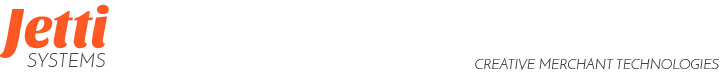
<style>
.page{position:relative;width:720px;height:72px;background:#ffffff}
.page>*{position:absolute;margin:0}
.t1{font:57.7px "SansitaOne";letter-spacing:-0.01em;color:#ff5622;scale:0.95 1}
.t2{font:19.5px "JosefinSans-LightItalic";letter-spacing:0.01em;color:#444444;text-transform:uppercase;scale:0.94 1}
.t3{font:14.4px "JosefinSans-LightItalic";letter-spacing:0.01em;color:#444444;text-transform:uppercase;scale:0.94 1}
</style>
<div class="page">
<p class="t1" style="left:0px;top:4px;width:109px;height:54px">Jetti</p>
<p class="t2" style="left:27px;top:52px;width:78px;height:15px">systems</p>
<p class="t3" style="left:475px;top:58px;width:244px;height:12px">Creative Merchant Technologies</p>
</div>
